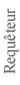
<style>
.page{position:relative;width:20px;height:85px;background:#ffffff}
.page>*{position:absolute;margin:0}
.t1{font:16px "TimesNewRomanPSMT";color:#686868}
</style>
<div class="page">
<p class="t1" style="left:3px;top:8px;width:16px;height:66px;rotate:-90deg">Requêteur</p>
</div>
